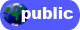
<style>
.page{position:relative;width:80px;height:30px;background:#5359ff}
.page>*{position:absolute;margin:0}
.t1{font:15.9px "Arial-Black";color:#fafafa}
</style>
<div class="page">
<p class="t1" style="left:21px;top:7px;width:53px;height:15px">public</p>
</div>
